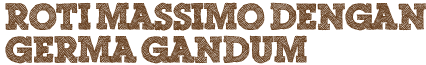
<style>
.page{position:relative;width:426px;height:65px;background:#ffffff}
.page>*{position:absolute;margin:0}
.t1{font:36px/33px "ScribbleBoxDEMO";color:#684121}
</style>
<div class="page">
<p class="t1" style="left:5px;top:2px;width:421px;height:62px">Roti Massimo dengan <br>Germa Gandum</p>
</div>
